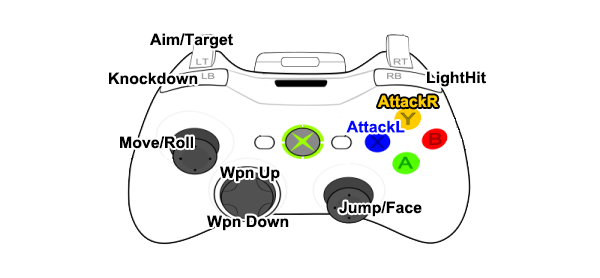
<style>
.page{position:relative;width:600px;height:278px;background:#ffffff}
.page>*{position:absolute;margin:0}
.t1{font:15.9px "Arial-BoldMT";color:#000000}
.t2{font:15.9px "Arial-BoldMT";color:#ffcc00}
.t3{font:15.9px "Arial-BoldMT";color:#0006ff}
</style>
<div class="page">
<p class="t1" style="left:150px;top:33px;width:83px;height:16px">Aim/Target</p>
<p class="t1" style="left:109px;top:72px;width:89px;height:13px">Knockdown</p>
<p class="t1" style="left:427px;top:71px;width:59px;height:16px">LightHit</p>
<p class="t2" style="left:378px;top:95px;width:60px;height:13px">AttackR</p>
<p class="t3" style="left:346px;top:120px;width:59px;height:13px">AttackL</p>
<p class="t1" style="left:120px;top:136px;width:73px;height:13px">Move/Roll</p>
<p class="t1" style="left:220px;top:166px;width:60px;height:16px">Wpn Up</p>
<p class="t1" style="left:339px;top:201px;width:83px;height:16px">Jump/Face</p>
<p class="t1" style="left:207px;top:215px;width:82px;height:16px">Wpn Down</p>
</div>
